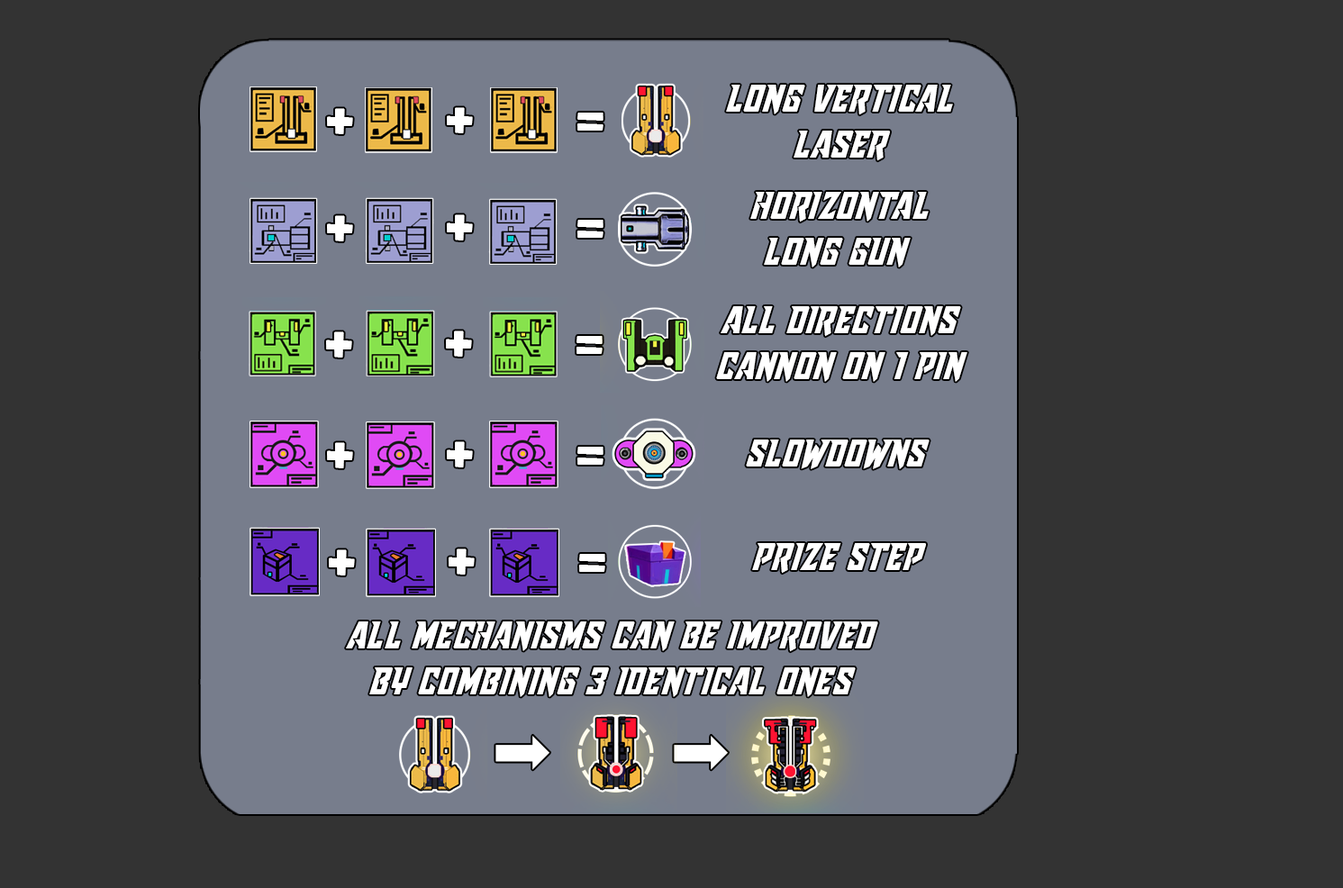
<style>
.page{position:relative;width:1343px;height:888px;background:#333333}
.page>*{position:absolute;margin:0}
.t1{font:38.3px "RaiderCrusader";color:#ffffff}
.t2{font:45.8px "MotelKing";color:#ffffff}
</style>
<div class="page">
<p class="t1" style="left:726px;top:85px;width:227px;height:76px;text-align:center">long vertical<br>laser</p>
<p class="t2" style="left:327px;top:108px;width:26px;height:26px">+</p>
<p class="t2" style="left:447px;top:107px;width:26px;height:26px">+</p>
<p class="t2" style="left:577px;top:113px;width:26px;height:18px">=</p>
<p class="t1" style="left:750px;top:192px;width:179px;height:75px;text-align:center">horizontal<br>long gun</p>
<p class="t2" style="left:327px;top:215px;width:26px;height:26px">+</p>
<p class="t2" style="left:447px;top:214px;width:26px;height:26px">+</p>
<p class="t2" style="left:577px;top:220px;width:26px;height:18px">=</p>
<p class="t1" style="left:716px;top:306px;width:251px;height:76px;text-align:center">all directions<br>cannon on 1 pin</p>
<p class="t2" style="left:326px;top:331px;width:26px;height:27px">+</p>
<p class="t2" style="left:446px;top:331px;width:26px;height:26px">+</p>
<p class="t2" style="left:576px;top:336px;width:27px;height:18px">=</p>
<p class="t2" style="left:327px;top:442px;width:26px;height:26px">+</p>
<p class="t2" style="left:447px;top:441px;width:26px;height:26px">+</p>
<p class="t2" style="left:577px;top:447px;width:26px;height:18px">=</p>
<p class="t1" style="left:746px;top:440px;width:183px;height:29px">slowdowns</p>
<p class="t1" style="left:752px;top:543px;width:174px;height:31px">prize step</p>
<p class="t2" style="left:329px;top:549px;width:26px;height:26px">+</p>
<p class="t2" style="left:449px;top:548px;width:26px;height:27px">+</p>
<p class="t2" style="left:579px;top:554px;width:26px;height:18px">=</p>
<p class="t1" style="left:346px;top:621px;width:532px;height:76px;text-align:center">all mechanisms can be improved<br>by combining 3 identical ones</p>
</div>
